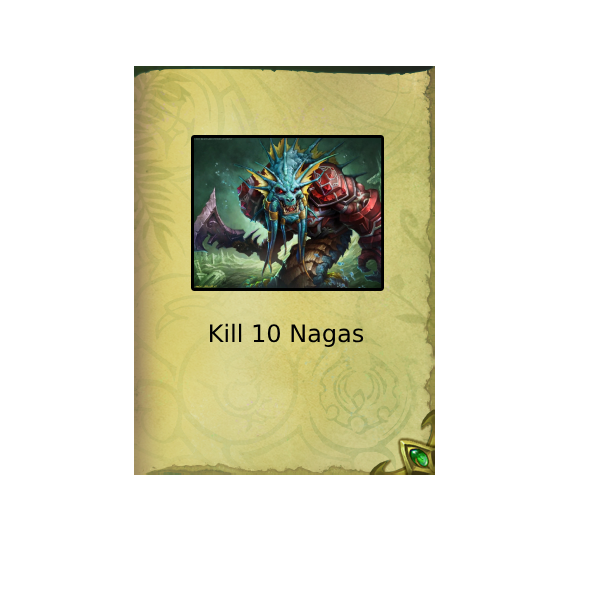
<style>
.page{position:relative;width:589px;height:589px;background:#ffffff}
.page>*{position:absolute;margin:0}
.t1{font:24px "DejaVuSans";color:#000000}
</style>
<div class="page">
<p class="t1" style="left:210px;top:323px;width:154px;height:24px">Kill 10 Nagas</p>
</div>
